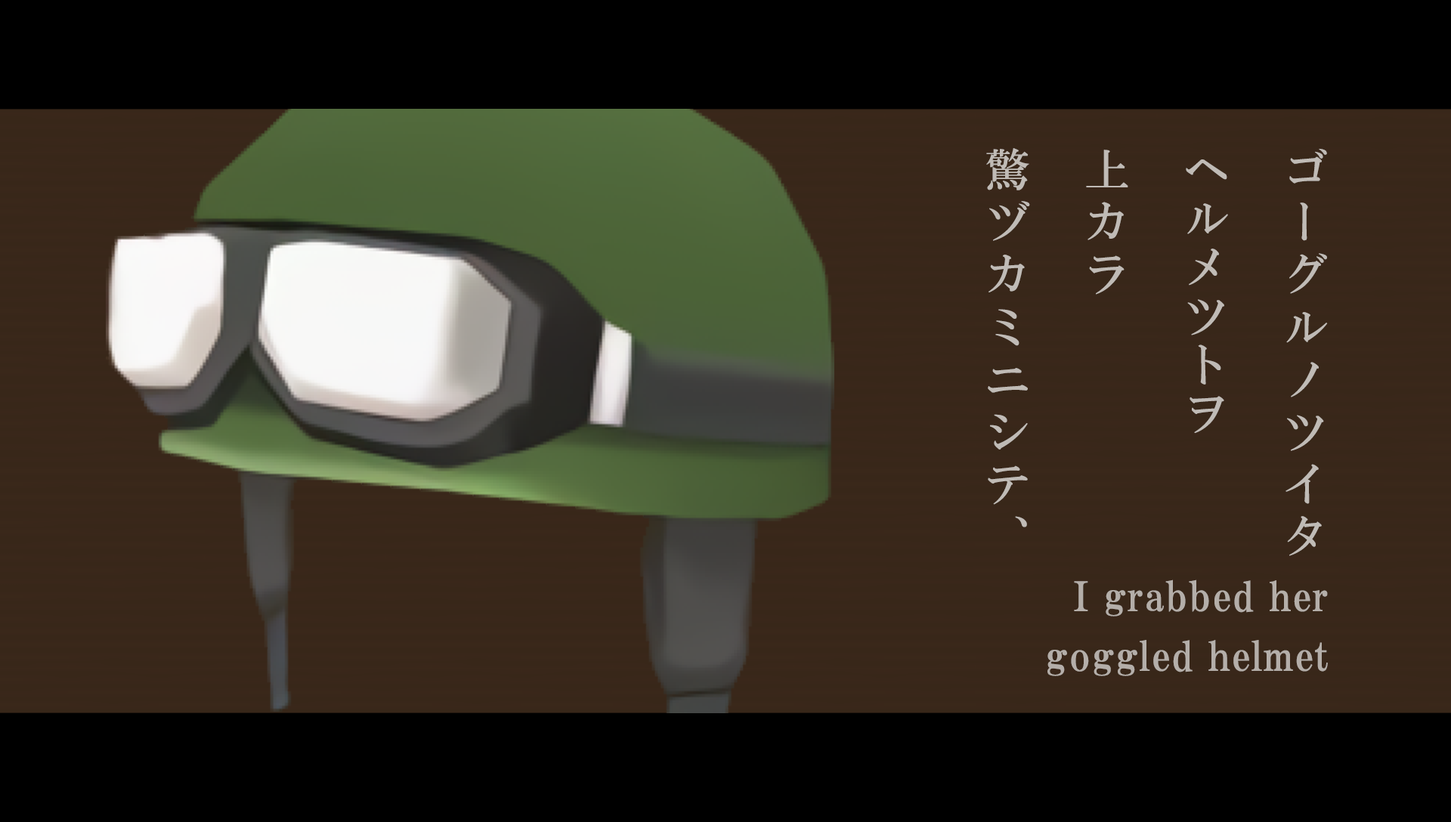
<style>
.page{position:relative;width:1451px;height:822px;background:#000000}
.page>*{position:absolute;margin:0}
.t1{font:44.9px/99.2px "HGMinchoB";letter-spacing:0.17em;color:#c0bbb6}
.t2{font:44.9px/99.2px "HGMinchoB";letter-spacing:0.09em;color:#c0bbb6}
.t3{font:40.3px/59.7px "HGPMinchoE";letter-spacing:0.025em;color:#b4aea9}
</style>
<div class="page">
<p class="t1" style="left:986px;top:148px;width:341px;height:408px">ゴーグルノツイタ<br><span class="t2">ヘルメツトヲ<br></span>上カラ<br>驚ヅカミニシテ、</p>
<p class="t3" style="left:1047px;top:579px;width:280px;height:97px;text-align:right">I grabbed her<br>goggled helmet</p>
</div>
